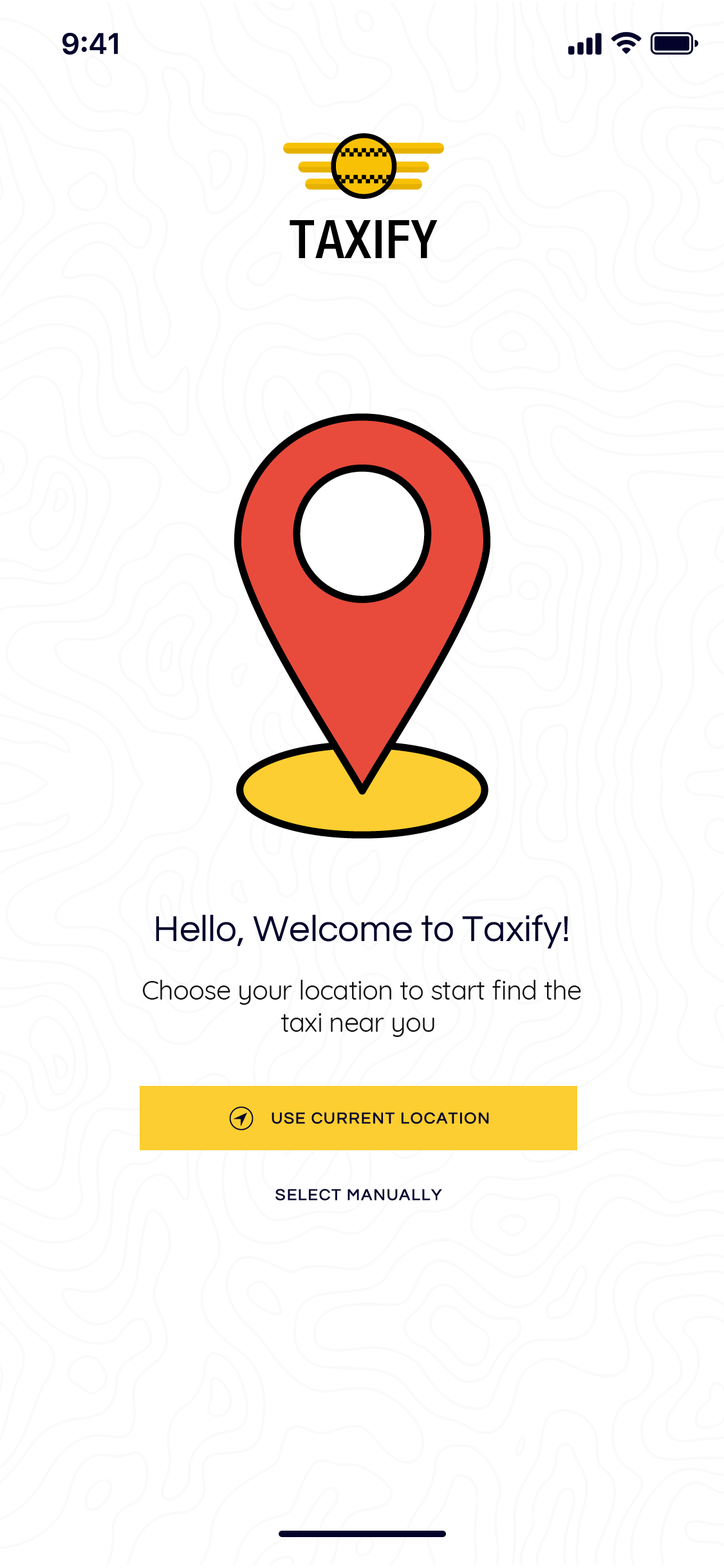
<style>
.page{position:relative;width:724px;height:1568px;background:#ffffff}
.page>*{position:absolute;margin:0}
.t1{font:53.6px "HelveticaNeue-MediumCond";letter-spacing:0.02em;color:#000000;text-transform:uppercase}
.t2{font:37.5px "Questrial-Regular";color:#03032b}
.t3{font:26.8px/32.2px "Quicksand-Regular";letter-spacing:-0.02em;color:#121212}
.t4{font:16.1px "Questrial-Regular";letter-spacing:0.06em;color:#03032b;font-weight:bold}
</style>
<div class="page">
<p class="t1" style="left:290px;top:220px;width:148px;height:38px">Taxify</p>
<p class="t2" style="left:156px;top:914px;width:412px;height:35px">Hello, Welcome to Taxify!</p>
<p class="t3" style="left:143px;top:980px;width:438px;height:57px;text-align:center">Choose your location to start find the<br>taxi near you</p>
<p class="t4" style="left:272px;top:1112px;width:217px;height:12px">USE CURRENT LOCATION</p>
<p class="t4" style="left:275px;top:1189px;width:167px;height:11px">SELECT MANUALLY</p>
</div>
